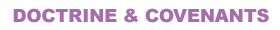
<style>
.page{position:relative;width:280px;height:30px;background:#ffffff}
.page>*{position:absolute;margin:0}
.t1{font:17.9px "Arial-Black";color:#a66cac}
</style>
<div class="page">
<p class="t1" style="left:13px;top:8px;width:256px;height:15px">DOCTRINE &amp; COVENANTS</p>
</div>
